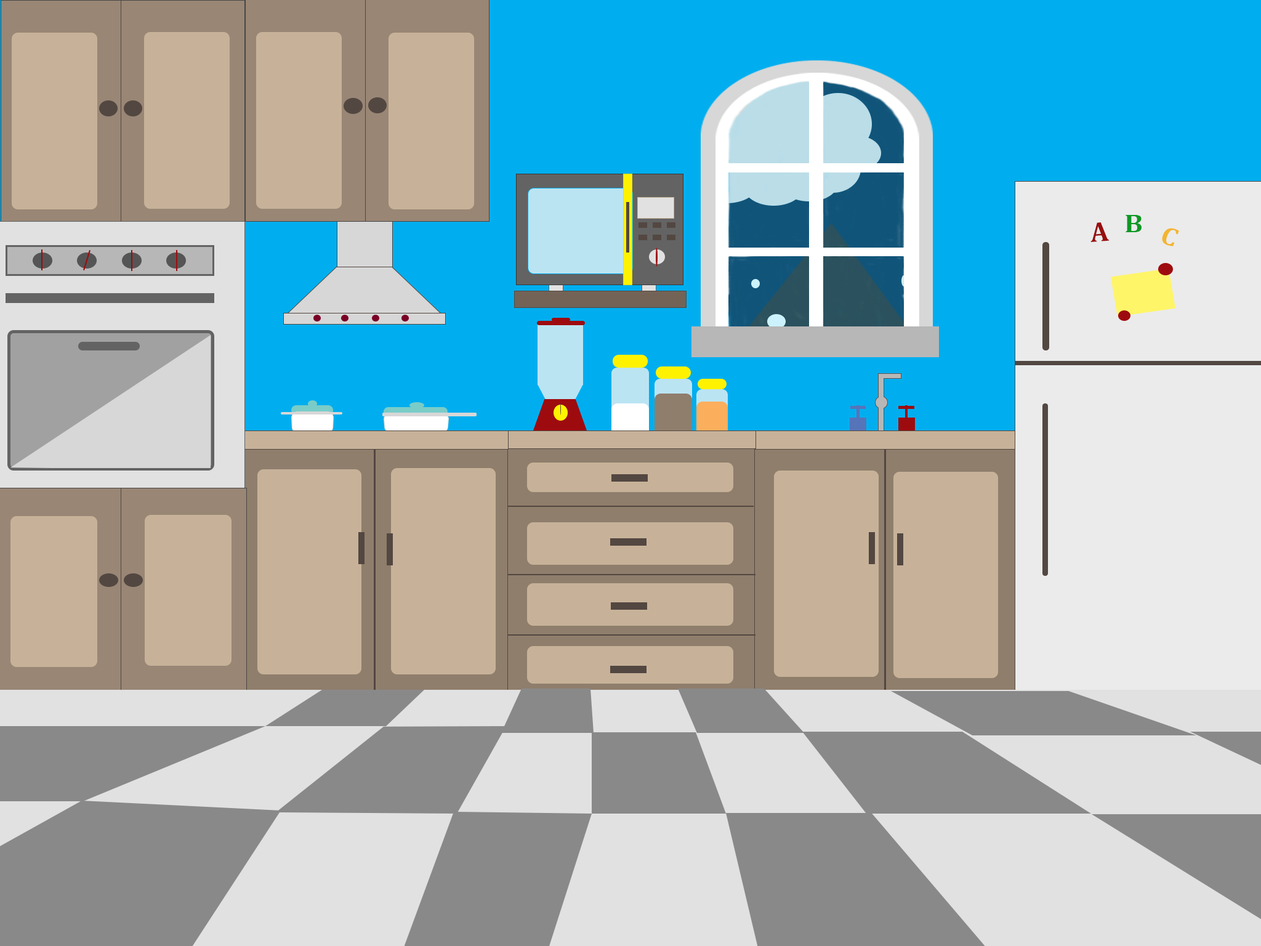
<style>
.page{position:relative;width:1261px;height:946px}
.page>*{position:absolute;margin:0}
.t1{font:25.7px "Cambria-Bold";color:#0e9825;scale:1.09 1}
.t2{font:28.1px "Cambria-Bold";color:#980e0e}
.t3{font:25.9px "Cambria-Bold";color:#f3b52f;scale:1.07 1}
</style>
<div class="page">
<p class="t1" style="left:1125px;top:215px;width:16px;height:17px">B</p>
<p class="t2" style="left:1090px;top:222px;width:19px;height:20px;rotate:-5deg">A</p>
<p class="t3" style="left:1162px;top:228px;width:17px;height:18px;rotate:18deg">C</p>
</div>
